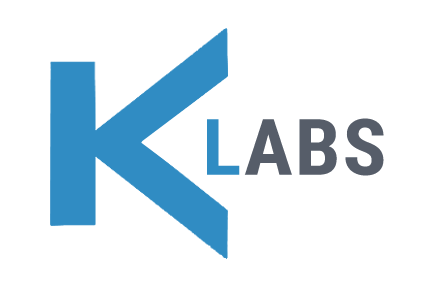
<style>
.page{position:relative;width:428px;height:284px;background:#ffffff}
.page>*{position:absolute;margin:0}
.t1{font:78px "RobotoCondensed-Bold";letter-spacing:0.025em;color:#565d69;text-transform:uppercase;scale:1.05 1}
.t2{font:78px "RobotoCondensed-Bold";letter-spacing:0.025em;color:#308cc3;text-transform:uppercase;scale:1.05 1}
</style>
<div class="page">
<p class="t1" style="left:207px;top:118px;width:177px;height:58px"><span class="t2">L</span>abs</p>
</div>
